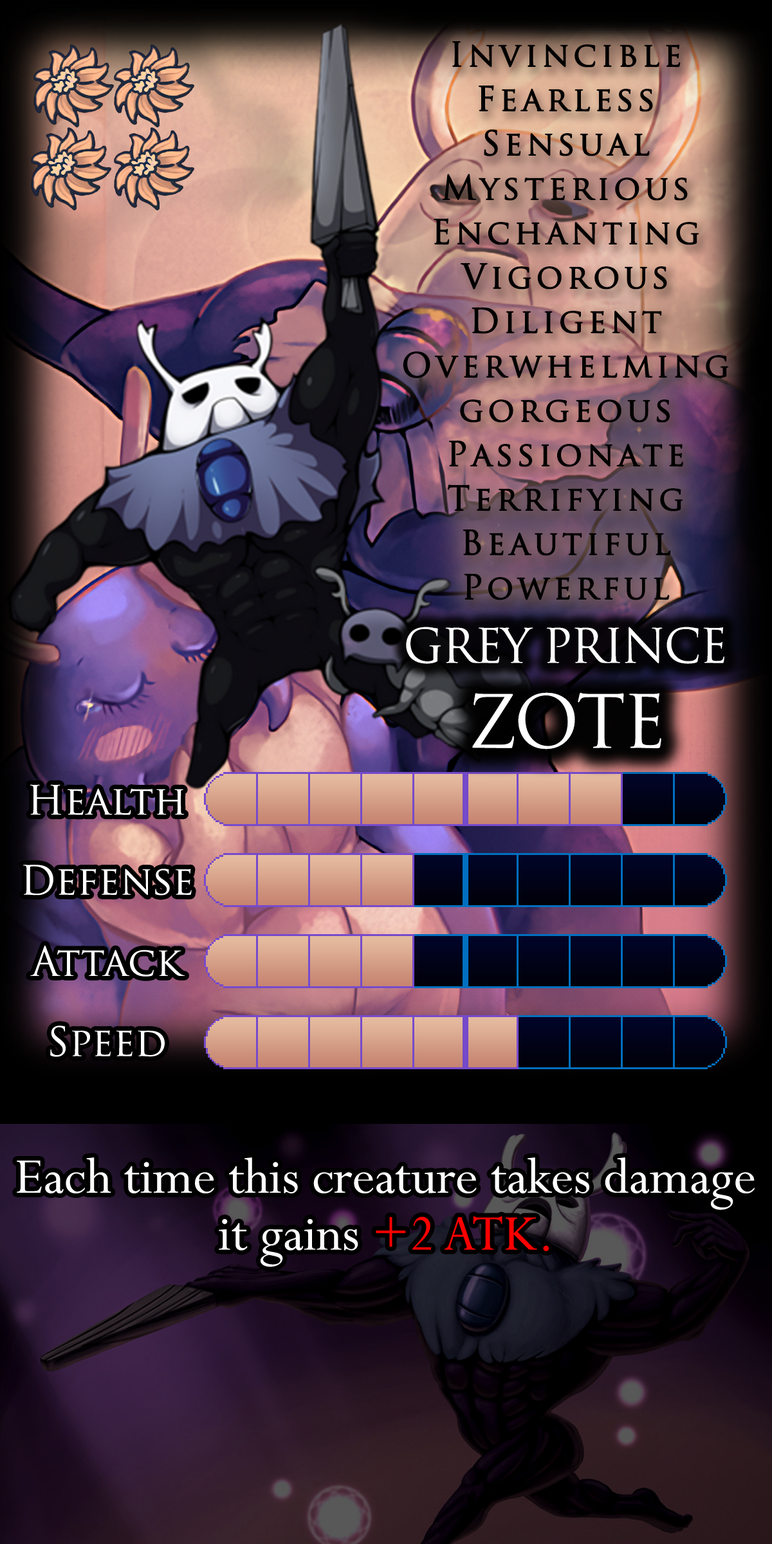
<style>
.page{position:relative;width:772px;height:1544px}
.page>*{position:absolute;margin:0}
.t1{font:32.8px/44.4px "TrajanPro-Regular";letter-spacing:0.1em;color:#000000;font-weight:bold}
.t2{font:46.3px "TrajanPro-Regular";letter-spacing:-0.04em;color:#ffffff}
.t3{font:71.4px "TrajanPro-Regular";letter-spacing:-0.04em;color:#ffffff}
.t4{font:67.6px "TrajanPro-Regular";color:#ffffff}
.t5{font:95.9px "Perpetua";color:#ffffff}
.t6{font:95.9px "Perpetua";color:#ff0000}
</style>
<div class="page">
<p class="t1" style="left:403px;top:41px;width:326px;height:559px;text-align:center">Invincible<br>Fearless<br>Sensual<br>Mysterious<br>Enchanting<br>Vigorous<br>Diligent<br>Overwhelming<br>gorgeous<br>Passionate<br>Terrifying<br>Beautiful<br>Powerful</p>
<p class="t2" style="left:406px;top:627px;width:319px;height:37px">GREY PRINCE</p>
<p class="t3" style="left:472px;top:692px;width:189px;height:58px">ZOTE</p>
<p class="t4" style="left:30px;top:784px;width:155px;height:31px">Health</p>
<p class="t4" style="left:23px;top:865px;width:169px;height:31px">Defense</p>
<p class="t4" style="left:30px;top:945px;width:155px;height:32px">Attack</p>
<p class="t4" style="left:50px;top:1026px;width:115px;height:31px">Speed</p>
<p class="t5" style="left:17px;top:1158px;width:738px;height:109px">Each time this creature takes damage it gains <span class="t6">+2 ATK.</span></p>
</div>
